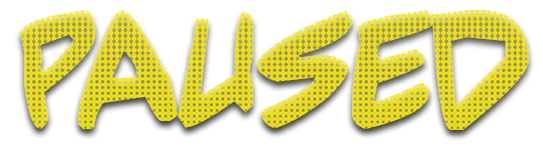
<style>
.page{position:relative;width:543px;height:150px;background:#ffffff}
.page>*{position:absolute;margin:0}
.t1{font:150px "AdamWarrenpro-Bold"}
</style>
<div class="page">
<p class="t1" style="left:20px;top:10px;width:509px;height:120px">PAUSED</p>
</div>
